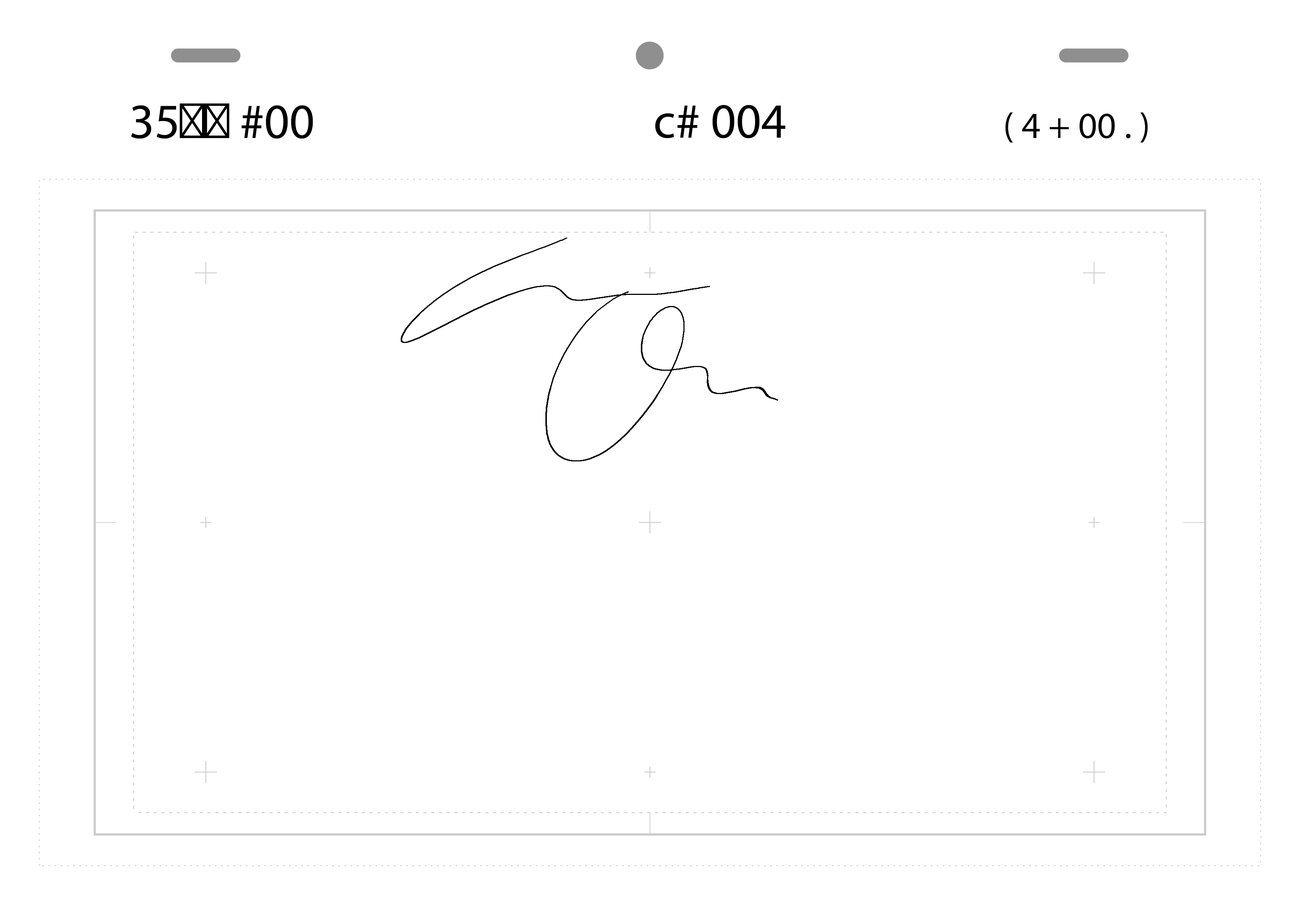
<style>
.page{position:relative;width:1298px;height:918px;background:#ffffff}
.page>*{position:absolute;margin:0}
.t1{font:49.4px "MyriadPro-Regular";color:#000000}
.t2{font:37px "MyriadPro-Regular";color:#000000}
</style>
<div class="page">
<p class="t1" style="left:131px;top:103px;width:182px;height:36px">35小隊 #00</p>
<p class="t1" style="left:656px;top:105px;width:130px;height:33px">c# 004</p>
<p class="t2" style="left:1006px;top:112px;width:142px;height:31px">( 4 + 00 . )</p>
</div>
